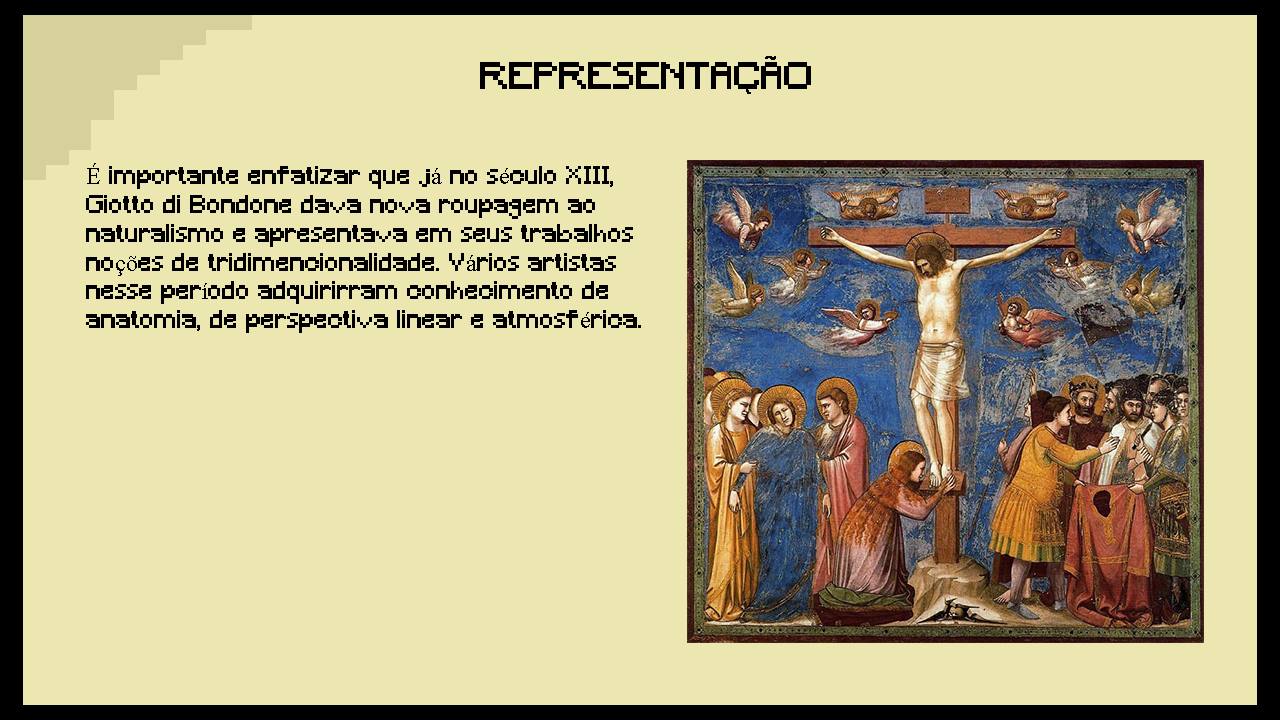
<style>
.page{position:relative;width:1280px;height:720px;background:#ece6b0}
.page>*{position:absolute;margin:0}
.t1{font:36px "Minecraft";color:#000000}
.t2{font:24px "Minecraft";color:#000000}
.t3{font:24px "TimesNewRomanPSMT";color:#000000}
</style>
<div class="page">
<p class="t1" style="left:480px;top:62px;width:331px;height:27px">REPRESENTACAO</p>
<p class="t2" style="left:86px;top:163px;width:555px;height:170px"><span class="t3">É</span> importante enfatizar que j<span class="t3">á</span> no s<span class="t3">é</span>culo XIII, Giotto di Bondone dava nova roupagem ao naturalismo e apresentava em seus trabalhos no<span class="t3">çõ</span>es de tridimencionalidade. V<span class="t3">á</span>rios artistas nesse per<span class="t3">í</span>odo adquirirram conhecimento de anatomia, de perspectiva linear e atmosf<span class="t3">é</span>rica.</p>
</div>
